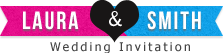
<style>
.page{position:relative;width:223px;height:53px;background:#ffffff}
.page>*{position:absolute;margin:0}
.t1{font:25px "BebasNeue";letter-spacing:0.075em;color:#ffffff}
.t2{font:20px "BellGothicStd-Bold";letter-spacing:0.075em;color:#ffffff}
.t3{font:12px "Tahoma";letter-spacing:0.2em;color:#454545}
</style>
<div class="page">
<p class="t1" style="left:23px;top:11px;width:56px;height:19px">Laura</p>
<p class="t2" style="left:109px;top:11px;width:13px;height:16px">&amp;</p>
<p class="t1" style="left:147px;top:11px;width:54px;height:19px">Smith</p>
<p class="t3" style="left:50px;top:42px;width:140px;height:11px">Wedding Invitation</p>
</div>
